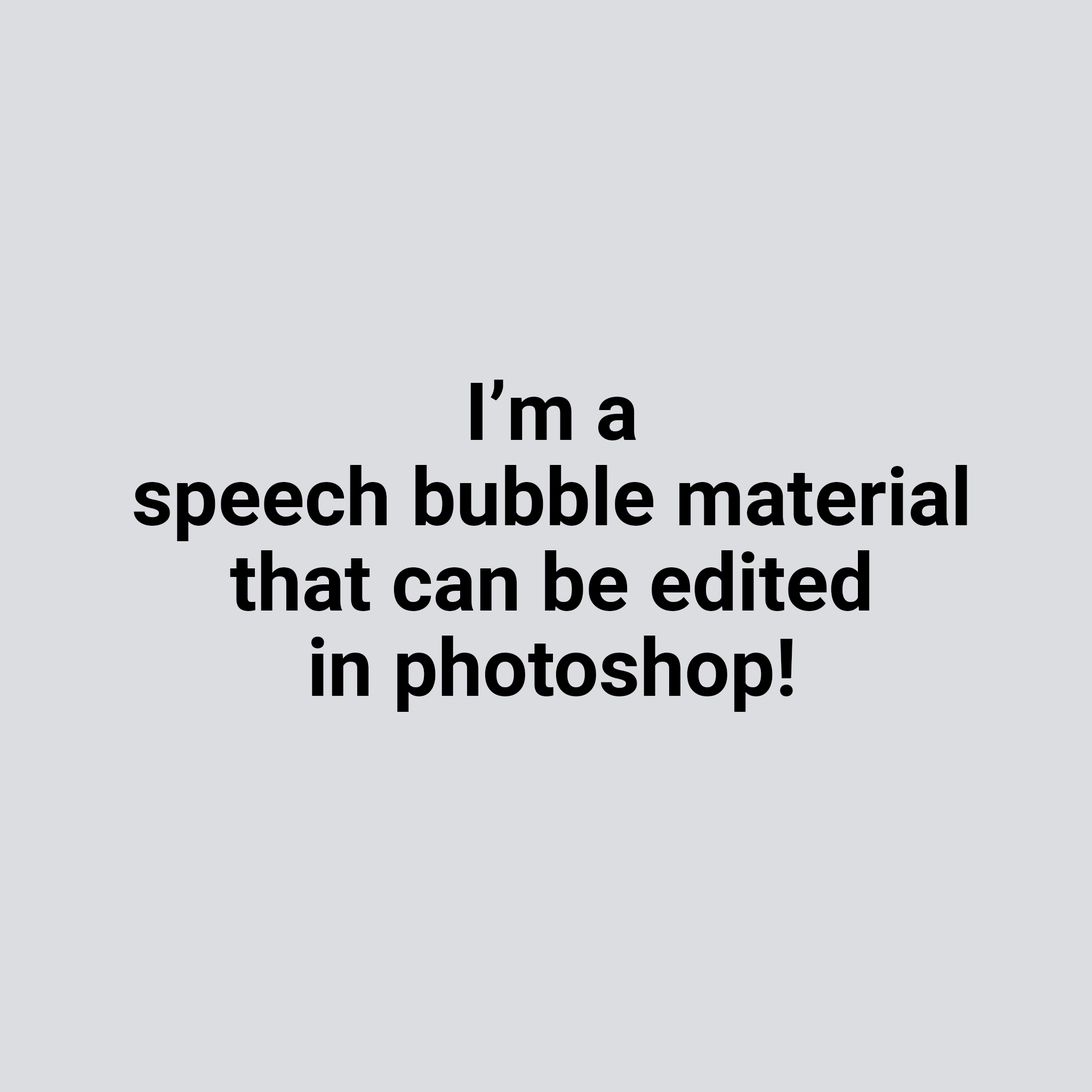
<style>
.page{position:relative;width:1092px;height:1092px;background:#dcdde1}
.page>*{position:absolute;margin:0}
.t1{font:80px/85.3px "Roboto-Bold";color:#000000}
</style>
<div class="page">
<p class="t1" style="left:134px;top:380px;width:833px;height:332px;text-align:center">I’m a <br>speech bubble material<br>that can be edited<br>in photoshop!</p>
</div>
